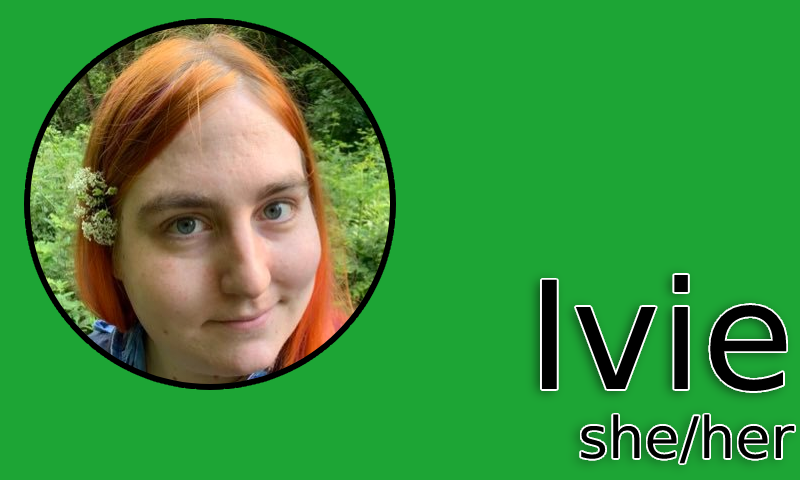
<style>
.page{position:relative;width:800px;height:480px;background:#1da535}
.page>*{position:absolute;margin:0}
.t1{font:57.4px "DejaVuSans";color:#000000}
.t2{font:150px "DejaVuSans";color:#000000}
</style>
<div class="page">
<p class="t1" style="left:541px;top:275px;width:254px;height:189px;text-align:right"><span class="t2">Ivie<br></span>she/her</p>
</div>
